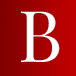
<style>
.page{position:relative;width:76px;height:76px}
.page>*{position:absolute;margin:0}
.t1{font:71.2px "PlayfairDisplaySC-Regular";letter-spacing:-0.02em;color:#ffffff;text-transform:uppercase}
</style>
<div class="page">
<p class="t1" style="left:21px;top:11px;width:39px;height:51px">B</p>
</div>
